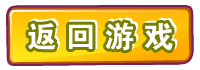
<style>
.page{position:relative;width:200px;height:70px;background:#ffffff}
.page>*{position:absolute;margin:0}
.t1{font:30px "Jdahei";letter-spacing:0.3em;color:#ffffff}
</style>
<div class="page">
<p class="t1" style="left:28px;top:22px;width:145px;height:29px">返回游戏</p>
</div>
